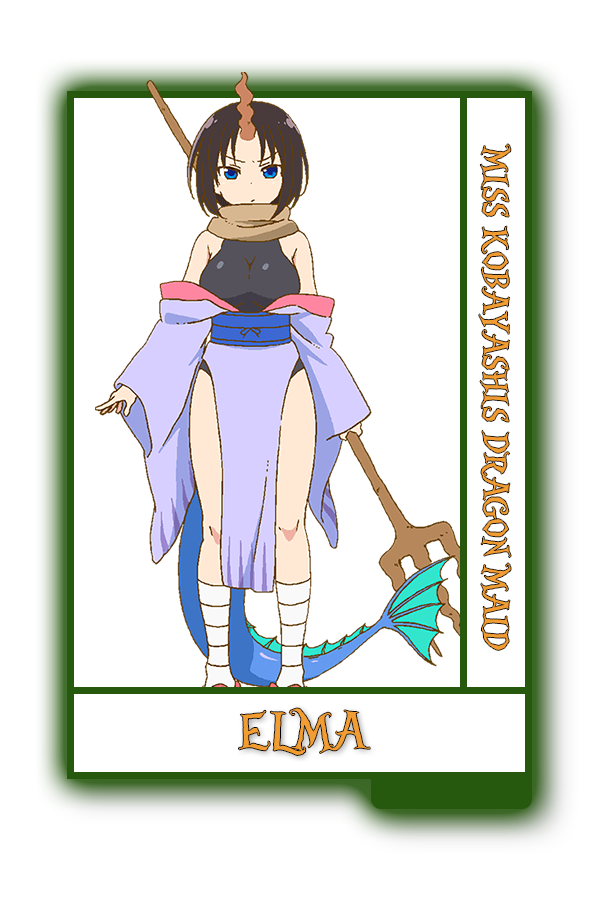
<style>
.page{position:relative;width:600px;height:900px;background:#ffffff}
.page>*{position:absolute;margin:0}
.t1{font:37.3px "AliceinWonderland";color:#f29d33}
.t2{font:56px "AliceinWonderland";color:#f29d33}
</style>
<div class="page">
<p class="t1" style="left:479px;top:144px;width:32px;height:506px;rotate:90deg">MISS KOBAYASHIS DRAGON MAID</p>
<p class="t2" style="left:239px;top:708px;width:131px;height:47px">ELMA</p>
</div>
